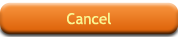
<style>
.page{position:relative;width:178px;height:37px}
.page>*{position:absolute;margin:0}
.t1{font:15px "TrebuchetMS";color:#f9f592}
</style>
<div class="page">
<p class="t1" style="left:67px;top:12px;width:44px;height:13px">Cancel</p>
</div>
